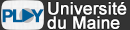
<style>
.page{position:relative;width:130px;height:30px}
.page>*{position:absolute;margin:0}
.t1{font:17px/14.4px "ArialMT";color:#ffffff;font-weight:bold}
.t2{font:17.6px "HelveticaNeue-Bold";letter-spacing:-0.1em;color:#005e98;font-weight:bold}
.t3{font:17.6px "HelveticaNeue-Bold";letter-spacing:-0.44em;color:#005e98;font-weight:bold}
.t4{font:17.6px "HelveticaNeue-Bold";color:#005e98;font-weight:bold}
</style>
<div class="page">
<p class="t1" style="left:47px;top:2px;width:80px;height:27px">Université<br>du Maine</p>
<p class="t2" style="left:2px;top:9px;width:42px;height:14px">P<span class="t3">L</span><span class="t4">   Y</span></p>
</div>
